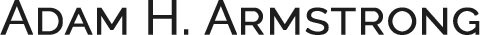
<style>
.page{position:relative;width:480px;height:35px;background:#ffffff}
.page>*{position:absolute;margin:0}
.t1{font:48px "Raleway-Regular";color:#1d1d1d;font-variant:small-caps;font-weight:bold}
</style>
<div class="page">
<p class="t1" style="left:0px;top:0px;width:480px;height:35px">Adam H. Armstrong</p>
</div>
